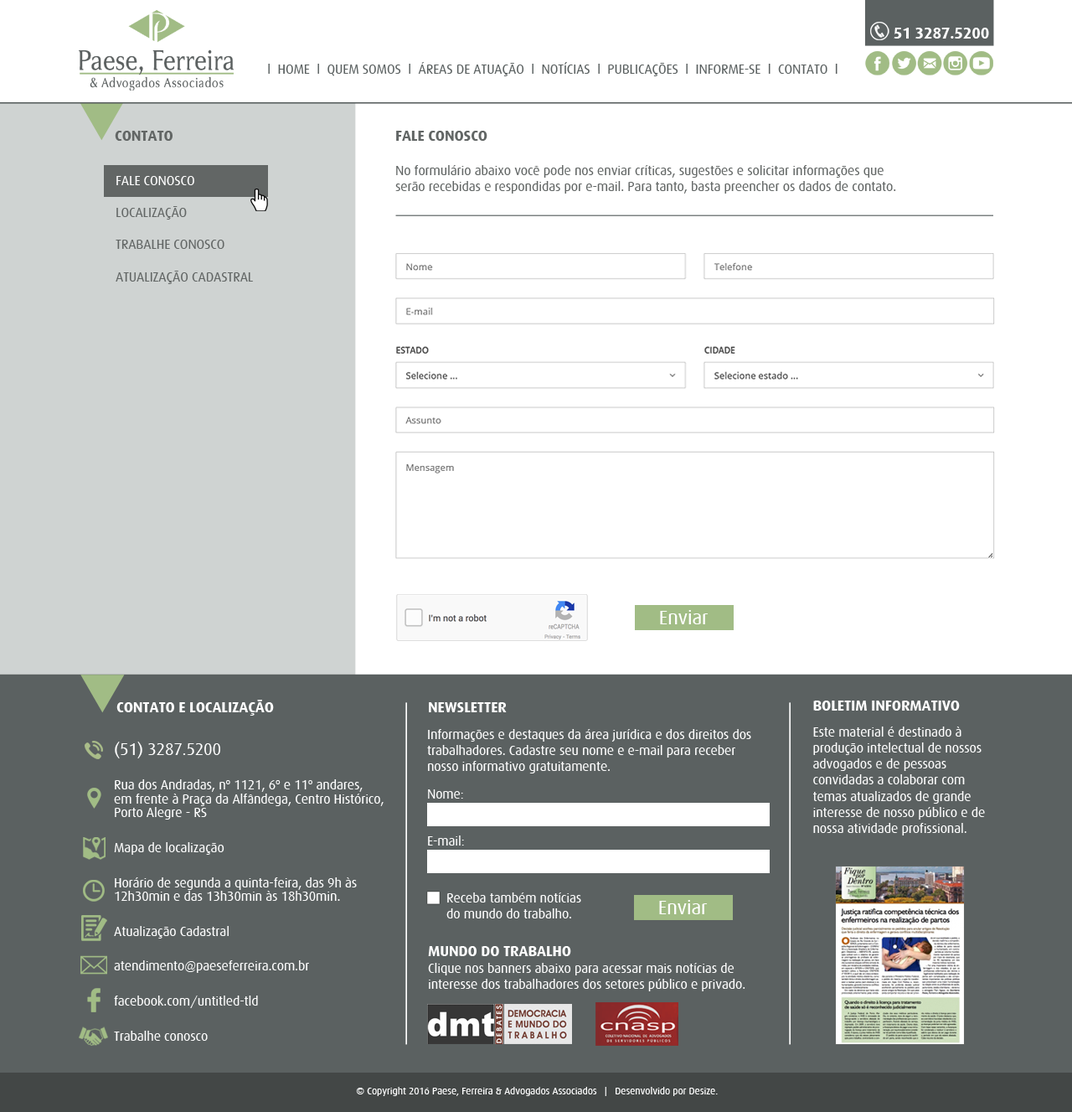
<style>
.page{position:relative;width:1072px;height:1112px;background:#ffffff}
.page>*{position:absolute;margin:0}
.t1{font:15.8px "Dax-Bold";letter-spacing:-0.01em;color:#ffffff}
.t2{font:13.4px "Dax-Regular";letter-spacing:-0.01em;color:#5b6161}
.t3{font:12.3px "ArialMT";letter-spacing:-0.01em;color:#000000}
.t4{font:15.1px "Dax-Bold";letter-spacing:-0.01em;color:#626665}
.t5{font:13.4px "Dax-Regular";letter-spacing:-0.01em;color:#626665}
.t6{font:19.9px "Dax-Regular";letter-spacing:-0.01em;color:#ffffff}
.t7{font:15.1px "Dax-Bold";letter-spacing:-0.01em;color:#ffffff}
.t8{font:13.4px "Dax-Regular";letter-spacing:-0.01em;color:#ffffff}
.t9{font:13.4px/13.9px "Dax-Regular";letter-spacing:-0.01em;color:#ffffff}
.t10{font:16.8px/13.9px "Dax-Regular";letter-spacing:-0.01em;color:#ffffff}
.t11{font:10.1px "Dax-Regular";letter-spacing:-0.01em;color:#ffffff}
</style>
<div class="page">
<p class="t1" style="left:894px;top:28px;width:96px;height:11px">51 3287.5200</p>
<p class="t2" style="left:268px;top:62px;width:570px;height:14px"><span class="t3"><br></span>l  HOME  l  QUEM SOMOS  l  ÁREAS DE ATUAÇÃO  l  NOTÍCIAS  l  PUBLICAÇÕES  l  INFORME-SE  l  CONTATO  l</p>
<p class="t4" style="left:115px;top:131px;width:58px;height:10px">CONTATO</p>
<p class="t5" style="left:395px;top:131px;width:502px;height:63px"><span class="t4">FALE CONOSCO<br><br></span>No formulário abaixo você pode nos enviar críticas, sugestões e solicitar informações que serão recebidas e respondidas por e-mail. Para tanto, basta preencher os dados de contato.</p>
<p class="t6" style="left:660px;top:610px;width:49px;height:14px">Enviar</p>
<p class="t7" style="left:116px;top:700px;width:158px;height:16px">CONTATO E LOCALIZAÇÃO</p>
<p class="t8" style="left:814px;top:700px;width:171px;height:135px"><span class="t7">BOLETIM INFORMATIVO<br><br></span>Este material é destinado à produção intelectual de nossos advogados e de pessoas convidadas a colaborar com temas atualizados de grande interesse de nosso público e de nossa atividade profissional.</p>
<p class="t7" style="left:429px;top:702px;width:78px;height:10px">NEWSLETTER</p>
<p class="t8" style="left:427px;top:729px;width:325px;height:44px">Informações e destaques da área jurídica e dos direitos dos trabalhadores. Cadastre seu nome e e-mail para receber nosso informativo gratuitamente.</p>
<p class="t9" style="left:114px;top:742px;width:270px;height:299px"><span class="t10">(51) 3287.5200<br><br></span>Rua dos Andradas, nº 1121, 6º e 11º andares, <br>em frente à Praça da Alfândega, Centro Histórico, Porto Alegre - RS<br><br>Mapa de localização<br><br>Horário de segunda a quinta-feira, das 9h às 12h30min e das 13h30min às 18h30min.<br><br>Atualização Cadastral<br><br>atendimento@paeseferreira.com.br<br><br>facebook.com/untitled-tld<br><br>Trabalhe conosco</p>
<p class="t8" style="left:428px;top:789px;width:35px;height:9px">Nome:</p>
<p class="t8" style="left:428px;top:835px;width:36px;height:10px">E-mail:</p>
<p class="t8" style="left:447px;top:892px;width:134px;height:26px">Receba também notícias<br>do mundo do trabalho.</p>
<p class="t6" style="left:659px;top:900px;width:49px;height:14px">Enviar</p>
<p class="t8" style="left:428px;top:946px;width:318px;height:45px"><span class="t7">MUNDO DO TRABALHO <br></span>Clique nos banners abaixo para acessar mais notícias de <br>interesse dos trabalhadores dos setores público e privado.</p>
<p class="t11" style="left:356px;top:1087px;width:362px;height:9px">© Copyright 2016 Paese, Ferreira &amp; Advogados Associados   |   Desenvolvido por Desize.</p>
</div>
